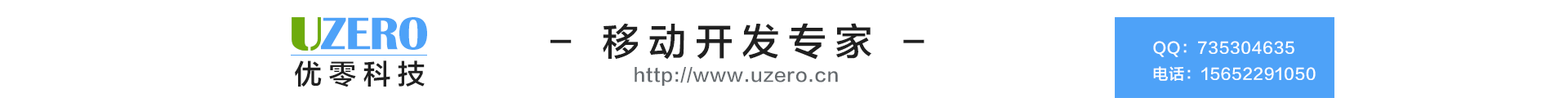
<style>
.page{position:relative;width:1568px;height:98px;background:#ffffff}
.page>*{position:absolute;margin:0}
.t1{font:47.1px "BritannicBold";letter-spacing:-0.02em;color:#4ea2f8}
.t2{font:37.6px "FZLTZHK--GBK1-0";letter-spacing:0.24em;color:#202020}
.t3{font:15.5px/26.1px "FZLTZHK--GBK1-0";letter-spacing:0.04em;color:#ffffff}
.t4{font:27.8px "FZLTZHK--GBK1-0";letter-spacing:0.24em;color:#202020}
.t5{font:18px "FZLTZHK--GBK1-0";letter-spacing:0.04em;color:#656a6e}
</style>
<div class="page">
<p class="t1" style="left:321px;top:17px;width:106px;height:33px">ZERO</p>
<p class="t2" style="left:550px;top:23px;width:374px;height:37px">- 移动开发专家 -</p>
<p class="t3" style="left:1153px;top:41px;width:163px;height:40px">QQ：735304635<br>电话：15652291050</p>
<p class="t4" style="left:295px;top:60px;width:130px;height:27px">优零科技</p>
<p class="t5" style="left:635px;top:67px;width:203px;height:19px">http://www.uzero.cn</p>
</div>
